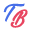
<style>
.page{position:relative;width:32px;height:32px;background:#ffffff}
.page>*{position:absolute;margin:0}
.t1{font:15.3px "VeganStylePersonalUse";color:#466ee8}
.t2{font:15.3px "VeganStylePersonalUse";color:#e84560}
</style>
<div class="page">
<p class="t1" style="left:3px;top:3px;width:22px;height:19px">T</p>
<p class="t2" style="left:10px;top:9px;width:18px;height:19px">B</p>
</div>
